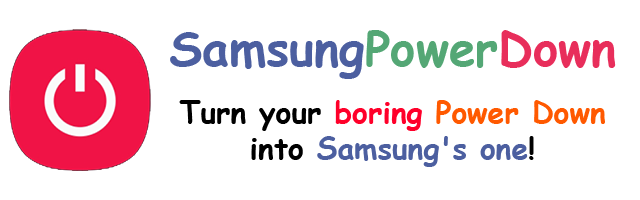
<style>
.page{position:relative;width:640px;height:200px;background:#ffffff}
.page>*{position:absolute;margin:0}
.t1{font:48px "ComicSansMS-Bold";color:#4c5fa0}
.t2{font:48px "ComicSansMS-Bold";color:#54a775}
.t3{font:48px "ComicSansMS-Bold";color:#e82e5b}
.t4{font:30px "ComicSansMS-Bold";color:#4c5fa0}
.t5{font:30px "ComicSansMS-Bold";color:#000000}
.t6{font:30px "ComicSansMS-Bold";color:#ff002a}
.t7{font:30px "ComicSansMS-Bold";color:#ff5900}
</style>
<div class="page">
<p class="t1" style="left:170px;top:30px;width:446px;height:49px">Samsung<span class="t2">Power</span><span class="t3">Down</span></p>
<p class="t4" style="left:179px;top:100px;width:426px;height:67px;text-align:center"><span class="t5">Turn your </span><span class="t6">boring </span><span class="t7">Power Down</span><span class="t5"> into </span>Samsung's one<span class="t5">!</span></p>
</div>
